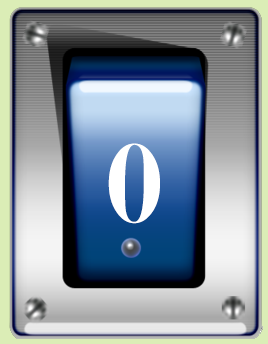
<style>
.page{position:relative;width:268px;height:344px}
.page>*{position:absolute;margin:0}
.t1{font:120px "Modern-Regular";color:#ffffff}
</style>
<div class="page">
<p class="t1" style="left:108px;top:143px;width:52px;height:81px">0</p>
</div>
